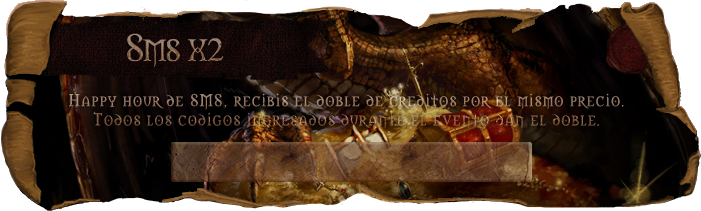
<style>
.page{position:relative;width:701px;height:211px}
.page>*{position:absolute;margin:0}
.t1{font:35.6px "Morpheus"}
.t2{font:16px "Morpheus";letter-spacing:0.1em}
</style>
<div class="page">
<p class="t1" style="left:127px;top:33px;width:97px;height:35px">Sms x2</p>
<p class="t2" style="left:69px;top:93px;width:555px;height:36px;text-align:center">Happy hour de SMS, recibis el doble de creditos por el mismo precio.<br>Todos los codigos ingresados durante el evento dan el doble.</p>
</div>
